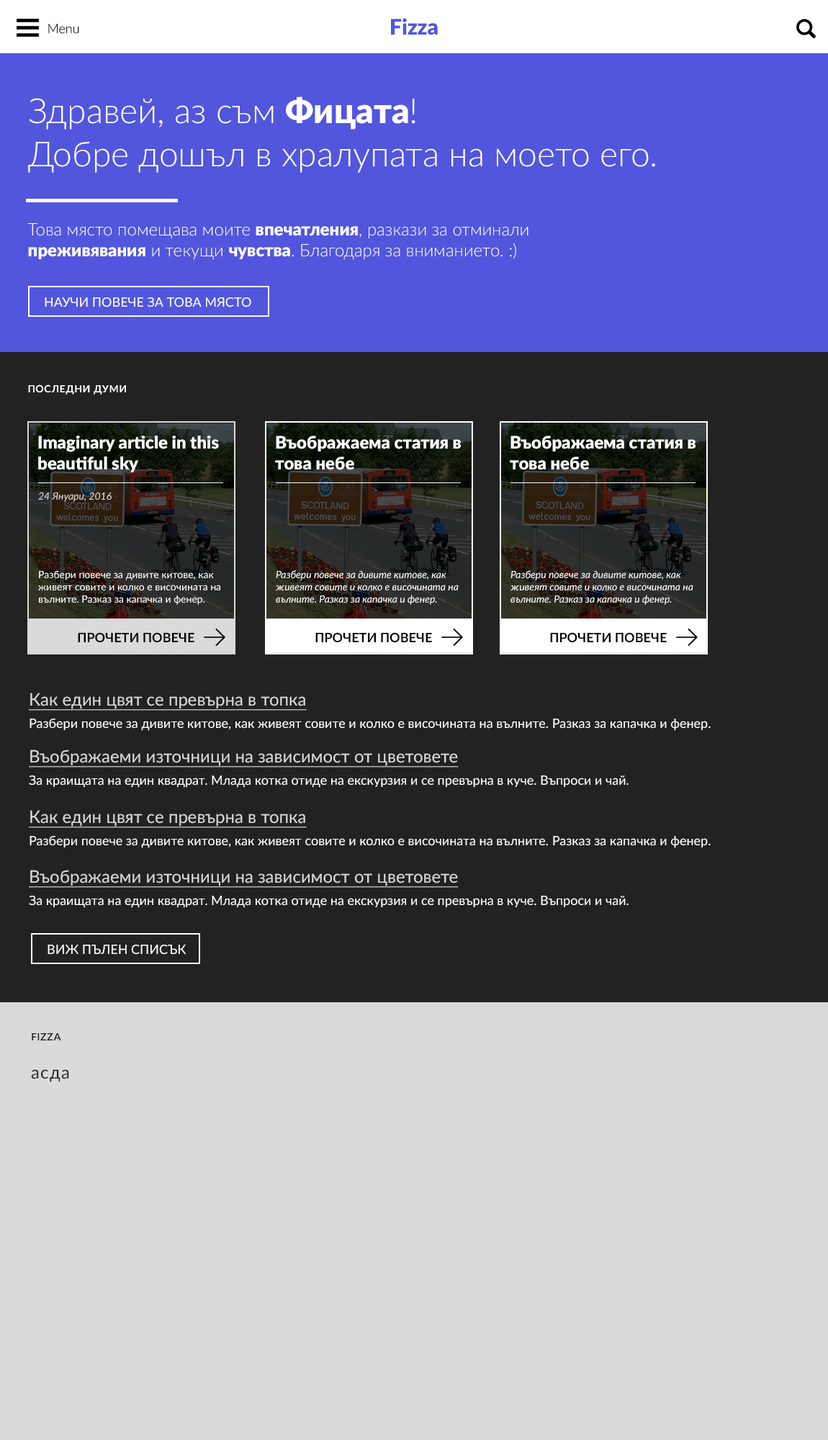
<style>
.page{position:relative;width:828px;height:1440px;background:#dadada}
.page>*{position:absolute;margin:0}
.t1{font:13px "Lato-Light"}
.t2{font:21.6px "Lato-Black";color:#5256dd}
.t3{font:34.6px/43.2px "Lato-Light";color:#ffffff}
.t4{font:34.6px/43.2px "Lato-Black";color:#ffffff}
.t5{font:17.3px "Lato-Light";color:#ffffff}
.t6{font:17.3px "Lato-Black";color:#ffffff}
.t7{font:13px "Lato-Regular";color:#ffffff}
.t8{font:10.1px "Lato-Bold";letter-spacing:0.05em;color:#ffffff}
.t9{font:10.1px "Lato-Italic";color:#dadada}
.t10{font:10.1px "Lato-Regular";color:#ffffff}
.t11{font:10.1px "Lato-Italic";color:#ffffff}
.t12{font:13px "Lato-Bold";color:#000000}
.t13{font:17.3px "Lato-Regular";color:#dadada;text-decoration:underline}
.t14{font:10.1px "Lato-Bold";letter-spacing:0.05em;color:#222222}
.t15{font:17.3px "Lato-Regular";letter-spacing:0.05em;color:#222222}
</style>
<div class="page">
<p class="t1" style="left:48px;top:24px;width:31px;height:10px">Menu</p>
<p class="t2" style="left:391px;top:18px;width:47px;height:17px">Fizza</p>
<p class="t3" style="left:28px;top:96px;width:627px;height:77px">Здравей, аз съм <span class="t4">Фицата</span>!<br>Добре дошъл в хралупата на моето его.</p>
<p class="t5" style="left:27px;top:223px;width:502px;height:37px">Това място помещава моите <span class="t6">впечатления</span>, разкази за отминали <span class="t6">преживявания</span> и текущи <span class="t6">чувства</span>. Благодаря за вниманието. :)</p>
<p class="t7" style="left:45px;top:297px;width:206px;height:10px">НАУЧИ ПОВЕЧЕ ЗА ТОВА МЯСТО</p>
<p class="t8" style="left:28px;top:384px;width:98px;height:11px">ПОСЛЕДНИ ДУМИ</p>
<p class="t6" style="left:38px;top:436px;width:181px;height:36px">Imaginary article in this beautiful sky</p>
<p class="t6" style="left:275px;top:436px;width:186px;height:34px">Въображаема статия в това небе</p>
<p class="t6" style="left:510px;top:436px;width:186px;height:34px">Въображаема статия в това небе</p>
<p class="t9" style="left:38px;top:492px;width:74px;height:10px">24 Януари, 2016</p>
<p class="t10" style="left:38px;top:571px;width:182px;height:34px">Разбери повече за дивите китове, как живеят совите и колко е височината на вълните. Разказ за капачка и фенер.</p>
<p class="t11" style="left:276px;top:570px;width:183px;height:35px">Разбери повече за дивите китове, как живеят совите и колко е височината на вълните. Разказ за капачка и фенер.</p>
<p class="t11" style="left:511px;top:570px;width:182px;height:35px">Разбери повече за дивите китове, как живеят совите и колко е височината на вълните. Разказ за капачка и фенер.</p>
<p class="t12" style="left:78px;top:632px;width:116px;height:11px">ПРОЧЕТИ ПОВЕЧЕ</p>
<p class="t12" style="left:315px;top:632px;width:117px;height:11px">ПРОЧЕТИ ПОВЕЧЕ</p>
<p class="t12" style="left:550px;top:632px;width:117px;height:11px">ПРОЧЕТИ ПОВЕЧЕ</p>
<p class="t13" style="left:29px;top:693px;width:278px;height:18px">Как един цвят се превърна в топка</p>
<p class="t7" style="left:30px;top:719px;width:681px;height:12px">Разбери повече за дивите китове, как живеят совите и колко е височината на вълните. Разказ за капачка и фенер.</p>
<p class="t13" style="left:29px;top:750px;width:430px;height:18px">Въображаеми източници на зависимост от цветовете</p>
<p class="t7" style="left:29px;top:775px;width:600px;height:13px">За краищата на един квадрат. Млада котка отиде на екскурзия и се превърна в куче. Въпроси и чай.</p>
<p class="t13" style="left:29px;top:810px;width:278px;height:18px">Как един цвят се превърна в топка</p>
<p class="t7" style="left:30px;top:836px;width:681px;height:12px">Разбери повече за дивите китове, как живеят совите и колко е височината на вълните. Разказ за капачка и фенер.</p>
<p class="t13" style="left:29px;top:870px;width:430px;height:18px">Въображаеми източници на зависимост от цветовете</p>
<p class="t7" style="left:29px;top:896px;width:600px;height:12px">За краищата на един квадрат. Млада котка отиде на екскурзия и се превърна в куче. Въпроси и чай.</p>
<p class="t7" style="left:48px;top:945px;width:138px;height:10px">ВИЖ ПЪЛЕН СПИСЪК</p>
<p class="t14" style="left:32px;top:1033px;width:29px;height:7px">FIZZA</p>
<p class="t15" style="left:31px;top:1069px;width:38px;height:13px">асда</p>
</div>
